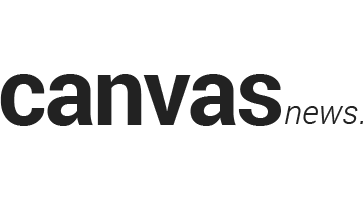
<style>
.page{position:relative;width:363px;height:200px;background:#ffffff}
.page>*{position:absolute;margin:0}
.t1{font:94px "Roboto-Bold";letter-spacing:-0.025em;color:#222222}
.t2{font:34px "Roboto-LightItalic";color:#222222}
</style>
<div class="page">
<p class="t1" style="left:0px;top:74px;width:281px;height:52px">canvas</p>
<p class="t2" style="left:285px;top:106px;width:78px;height:18px">news.</p>
</div>
